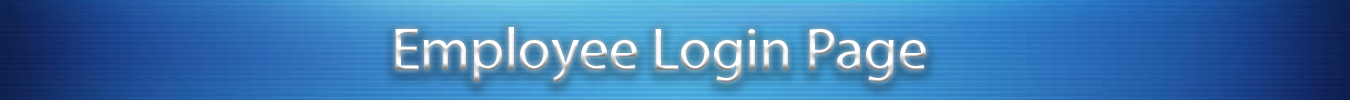
<style>
.page{position:relative;width:1350px;height:100px}
.page>*{position:absolute;margin:0}
.t1{font:60px "MyriadPro-Regular"}
</style>
<div class="page">
<p class="t1" style="left:395px;top:27px;width:531px;height:56px">Employee Login Page</p>
</div>
